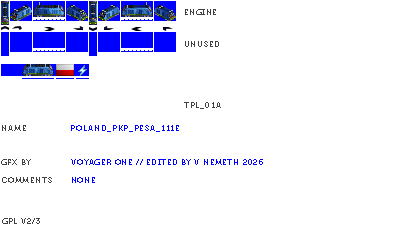
<style>
.page{position:relative;width:400px;height:230px;background:#ffffff}
.page>*{position:absolute;margin:0}
.t1{font:8px "Museo700-Regular";letter-spacing:0.075em;color:#404040;text-transform:uppercase}
.t2{font:8px "Museo700-Regular";letter-spacing:0.075em;color:#0000ff;text-transform:uppercase}
</style>
<div class="page">
<p class="t1" style="left:185px;top:9px;width:31px;height:6px">engine</p>
<p class="t1" style="left:185px;top:41px;width:34px;height:6px">unused</p>
<p class="t1" style="left:184px;top:102px;width:37px;height:7px">tpl_01a</p>
<p class="t1" style="left:2px;top:125px;width:24px;height:6px">name</p>
<p class="t2" style="left:71px;top:125px;width:108px;height:7px">Poland_PKP_PESA_111E</p>
<p class="t1" style="left:1px;top:159px;width:30px;height:6px">gfx by</p>
<p class="t2" style="left:71px;top:159px;width:192px;height:6px">voyager one // edited by v nemeth 2026</p>
<p class="t1" style="left:2px;top:177px;width:50px;height:6px">comments</p>
<p class="t2" style="left:72px;top:177px;width:23px;height:6px">none</p>
<p class="t1" style="left:2px;top:218px;width:38px;height:6px">gpl v2/3</p>
</div>
